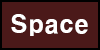
<style>
.page{position:relative;width:100px;height:50px;background:#4b1919}
.page>*{position:absolute;margin:0}
.t1{font:24px "H2gtrE";color:#ffffff}
</style>
<div class="page">
<p class="t1" style="left:11px;top:14px;width:77px;height:22px">Space</p>
</div>
